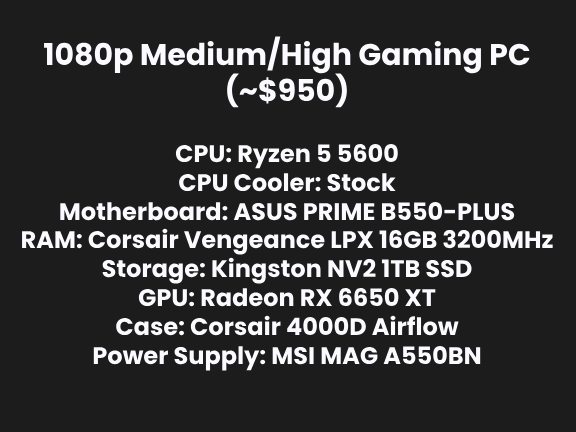
<style>
.page{position:relative;width:576px;height:432px;background:#1c1c1c}
.page>*{position:absolute;margin:0}
.t1{font:30px "Poppins-Bold";color:#fafaff}
.t2{font:24px "Poppins-Bold";color:#fafaff}
</style>
<div class="page">
<p class="t1" style="left:44px;top:36px;width:486px;height:72px;text-align:center">1080p Medium/High Gaming PC<br>(~$950)</p>
<p class="t2" style="left:22px;top:144px;width:531px;height:227px;text-align:center">CPU: Ryzen 5 5600<br>CPU Cooler: Stock<br>Motherboard: ASUS PRIME B550-PLUS<br>RAM: Corsair Vengeance LPX 16GB 3200MHz<br>Storage: Kingston NV2 1TB SSD<br>GPU: Radeon RX 6650 XT<br>Case: Corsair 4000D Airflow<br>Power Supply: MSI MAG A550BN</p>
</div>
